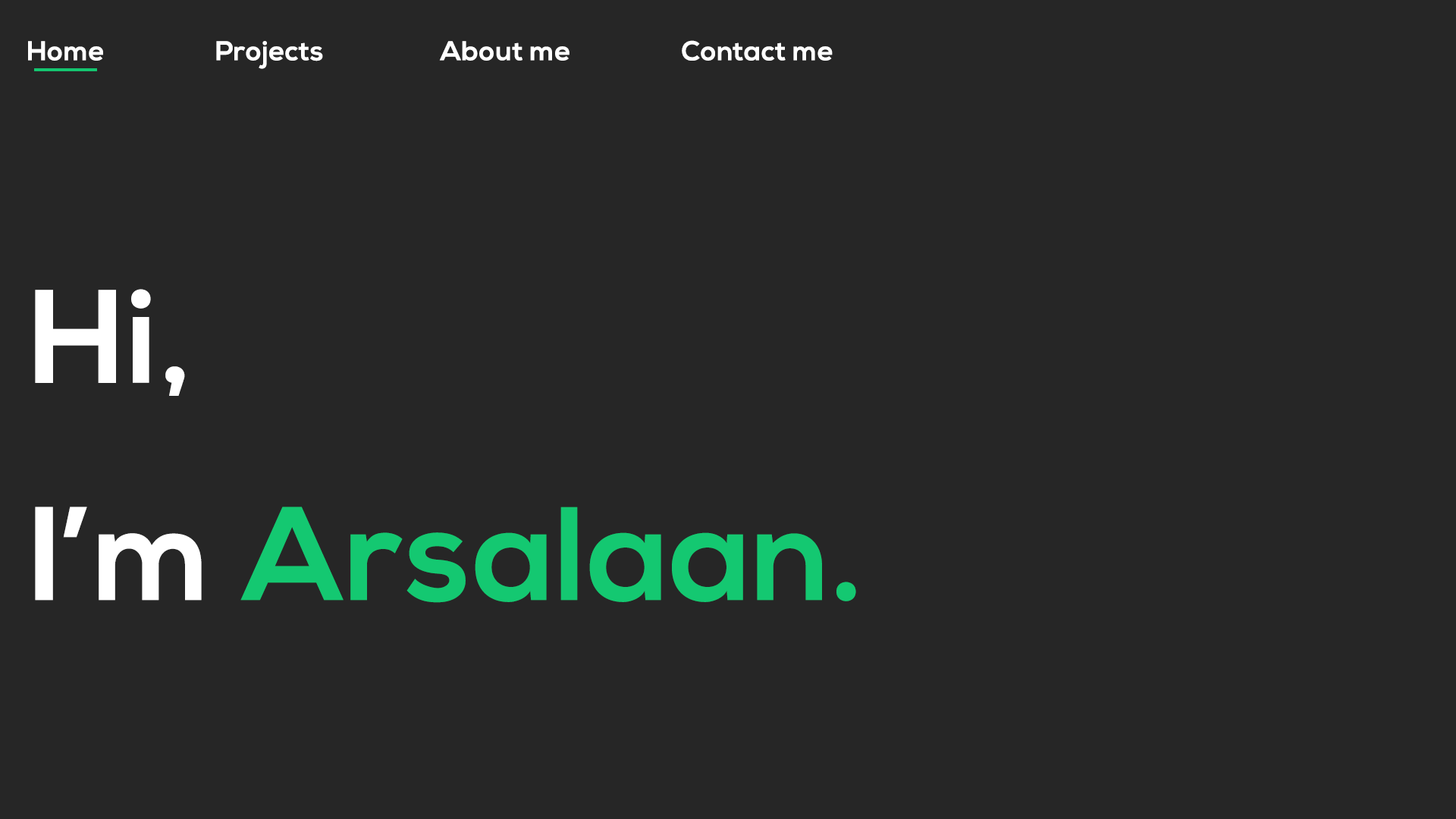
<style>
.page{position:relative;width:1456px;height:819px;background:#262626}
.page>*{position:absolute;margin:0}
.t1{font:27.1px "NexaBold";letter-spacing:0.015em;color:#ffffff}
.t2{font:132.6px/217.3px "NexaBold";letter-spacing:0.015em;color:#14c871}
.t3{font:132.6px/217.3px "NexaBold";letter-spacing:0.015em;color:#ffffff}
</style>
<div class="page">
<p class="t1" style="left:28px;top:40px;width:805px;height:29px">Home                  Projects                   About me                  Contact me</p>
<p class="t2" style="left:35px;top:289px;width:821px;height:314px"><span class="t3">Hi,<br>I’m </span>Arsalaan.</p>
</div>
